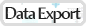
<style>
.page{position:relative;width:86px;height:26px;background:#ffffff}
.page>*{position:absolute;margin:0}
.t1{font:17.3px "AmiraParadiso";letter-spacing:-0.08em;color:#232323}
</style>
<div class="page">
<p class="t1" style="left:5px;top:7px;width:76px;height:16px">Data Export</p>
</div>
